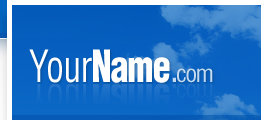
<style>
.page{position:relative;width:261px;height:120px}
.page>*{position:absolute;margin:0}
.t1{font:43.2px "Helvetica-Condensed";letter-spacing:-0.025em;color:#ffffff;scale:0.83 1}
.t2{font:43.2px "Helvetica-Condensed-Black";letter-spacing:-0.025em;color:#ffffff;scale:0.83 1}
.t3{font:43.2px "Helvetica-Condensed";letter-spacing:-0.075em;color:#c3daf0;scale:0.83 1}
.t4{font:24px "Helvetica-Condensed";letter-spacing:-0.075em;color:#c3daf0}
</style>
<div class="page">
<p class="t1" style="left:29px;top:49px;width:184px;height:34px">Your<span class="t2">Name</span><span class="t3">.</span><span class="t4">com</span></p>
</div>
